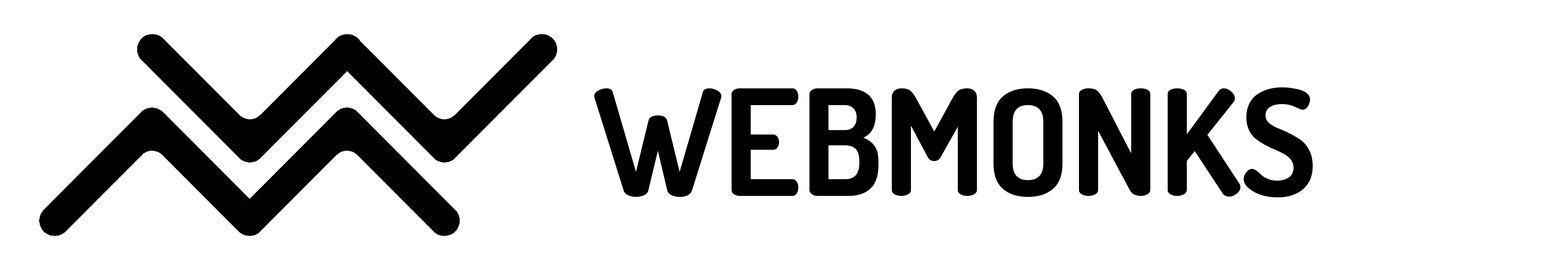
<style>
.page{position:relative;width:1568px;height:270px;background:#ffffff}
.page>*{position:absolute;margin:0}
.t1{font:147px "Dosis-Bold";color:#000000}
</style>
<div class="page">
<p class="t1" style="left:594px;top:87px;width:719px;height:110px">WEBMONKS</p>
</div>
